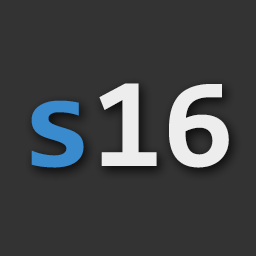
<style>
.page{position:relative;width:256px;height:256px;background:#333333}
.page>*{position:absolute;margin:0}
.t1{font:128px "Consolas-Bold";color:#ededed}
.t2{font:128px "Consolas-Bold";color:#3a8ace}
</style>
<div class="page">
<p class="t1" style="left:31px;top:83px;width:198px;height:85px"><span class="t2">s</span>16</p>
</div>
